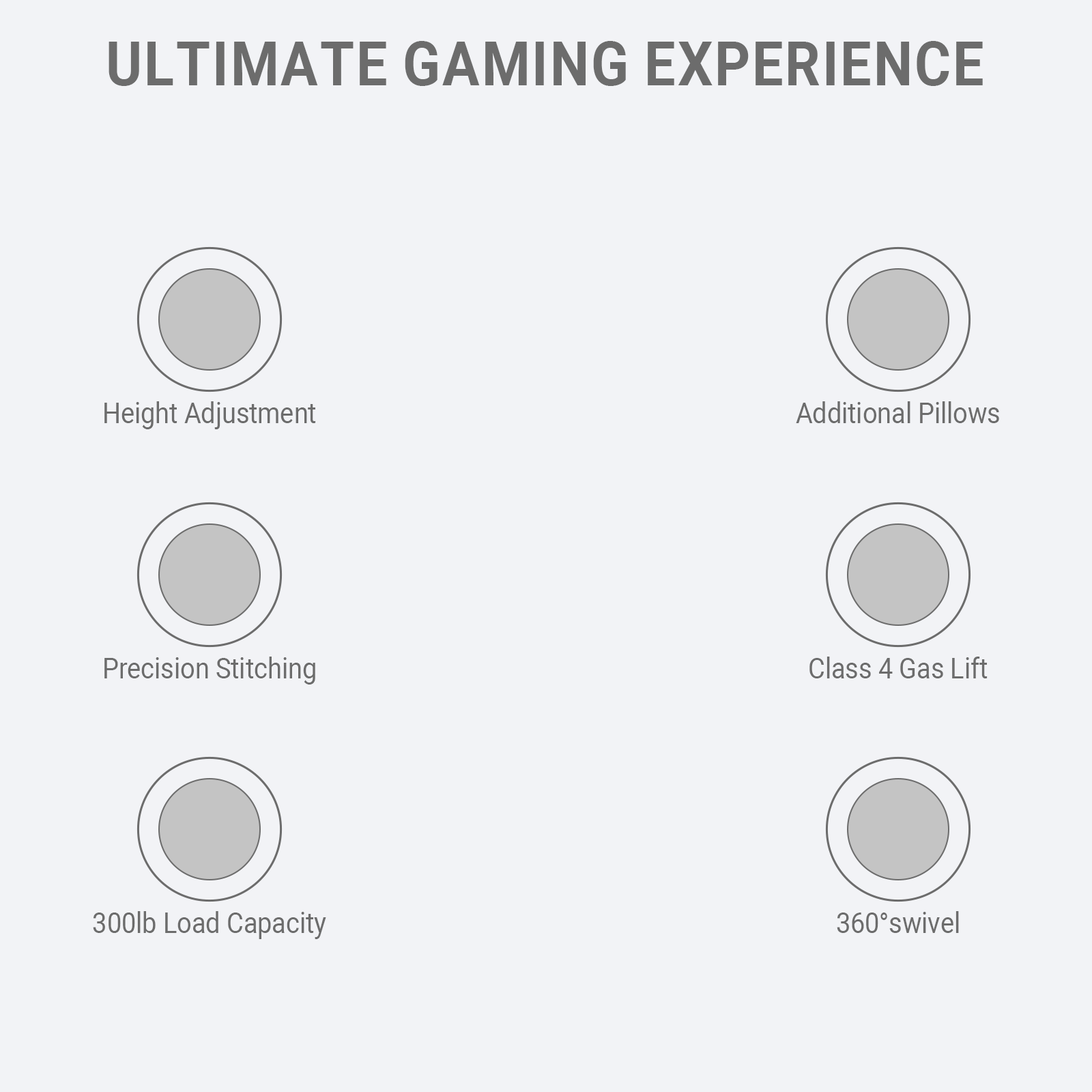
<style>
.page{position:relative;width:1092px;height:1092px;background:#f2f3f6}
.page>*{position:absolute;margin:0}
.t1{font:61.4px "Roboto-Bold";color:#6c6c6c;text-transform:uppercase;scale:0.9 1}
.t2{font:28.7px "Roboto-Regular";color:#6c6c6c;scale:0.9 1}
</style>
<div class="page">
<p class="t1" style="left:109px;top:41px;width:874px;height:45px">Ultimate gaming experience</p>
<p class="t2" style="left:104px;top:401px;width:212px;height:28px">Height Adjustment</p>
<p class="t2" style="left:796px;top:401px;width:203px;height:22px">Additional Pillows</p>
<p class="t2" style="left:104px;top:657px;width:211px;height:28px">Precision Stitching</p>
<p class="t2" style="left:809px;top:657px;width:179px;height:21px">Class 4 Gas Lift</p>
<p class="t2" style="left:93px;top:911px;width:233px;height:28px">300lb Load Capacity</p>
<p class="t2" style="left:837px;top:911px;width:122px;height:22px">360°swivel</p>
</div>
